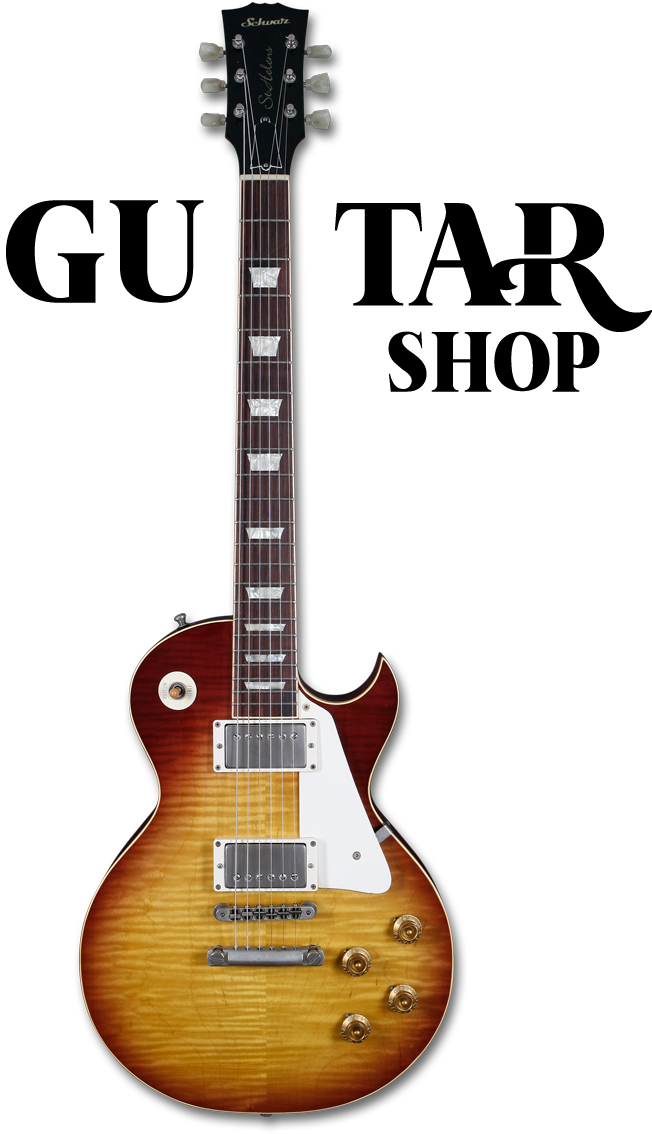
<style>
.page{position:relative;width:652px;height:1134px;background:#ffffff}
.page>*{position:absolute;margin:0}
.t1{font:188.4px "Rockabye-Regular";color:#000000}
.t2{font:109.4px "Rockabye-Regular";color:#000000}
</style>
<div class="page">
<p class="t1" style="left:6px;top:200px;width:198px;height:103px">GU</p>
<p class="t1" style="left:334px;top:203px;width:319px;height:129px">TAR</p>
<p class="t2" style="left:388px;top:331px;width:212px;height:61px">SHOP</p>
</div>
